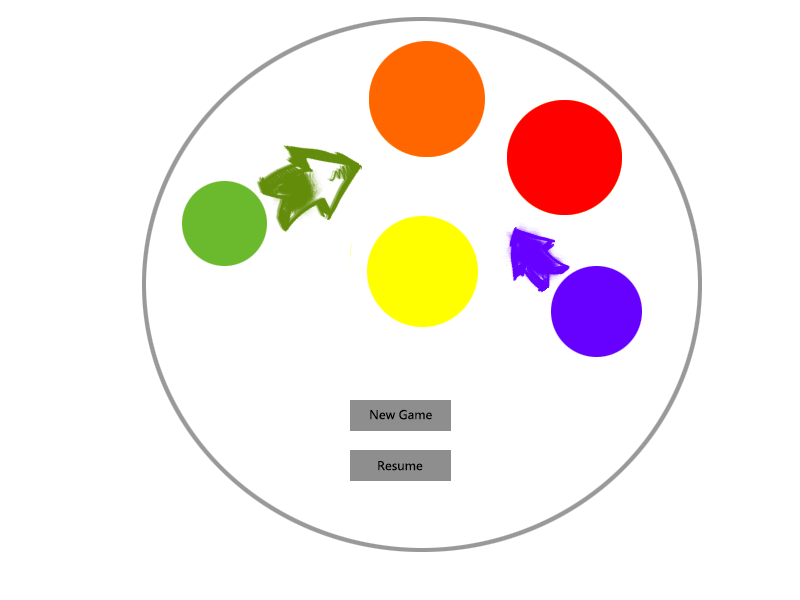
<style>
.page{position:relative;width:800px;height:600px;background:#ffffff}
.page>*{position:absolute;margin:0}
.t1{font:12px "MicrosoftYaHei";color:#000000}
</style>
<div class="page">
<p class="t1" style="left:370px;top:409px;width:62px;height:11px">New Game</p>
<p class="t1" style="left:378px;top:461px;width:45px;height:10px">Resume</p>
</div>
